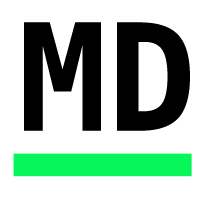
<style>
.page{position:relative;width:200px;height:200px;background:#ffffff}
.page>*{position:absolute;margin:0}
.t1{font:148.4px "BitstreamVeraSansMono-Bold";color:#000000}
</style>
<div class="page">
<p class="t1" style="left:24px;top:22px;width:166px;height:109px">MD</p>
</div>
